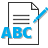
<style>
.page{position:relative;width:48px;height:48px;background:#ffffff}
.page>*{position:absolute;margin:0}
.t1{font:15px "SegoeUIBlack";color:#01aced}
</style>
<div class="page">
<p class="t1" style="left:1px;top:27px;width:31px;height:11px">ABC</p>
</div>
